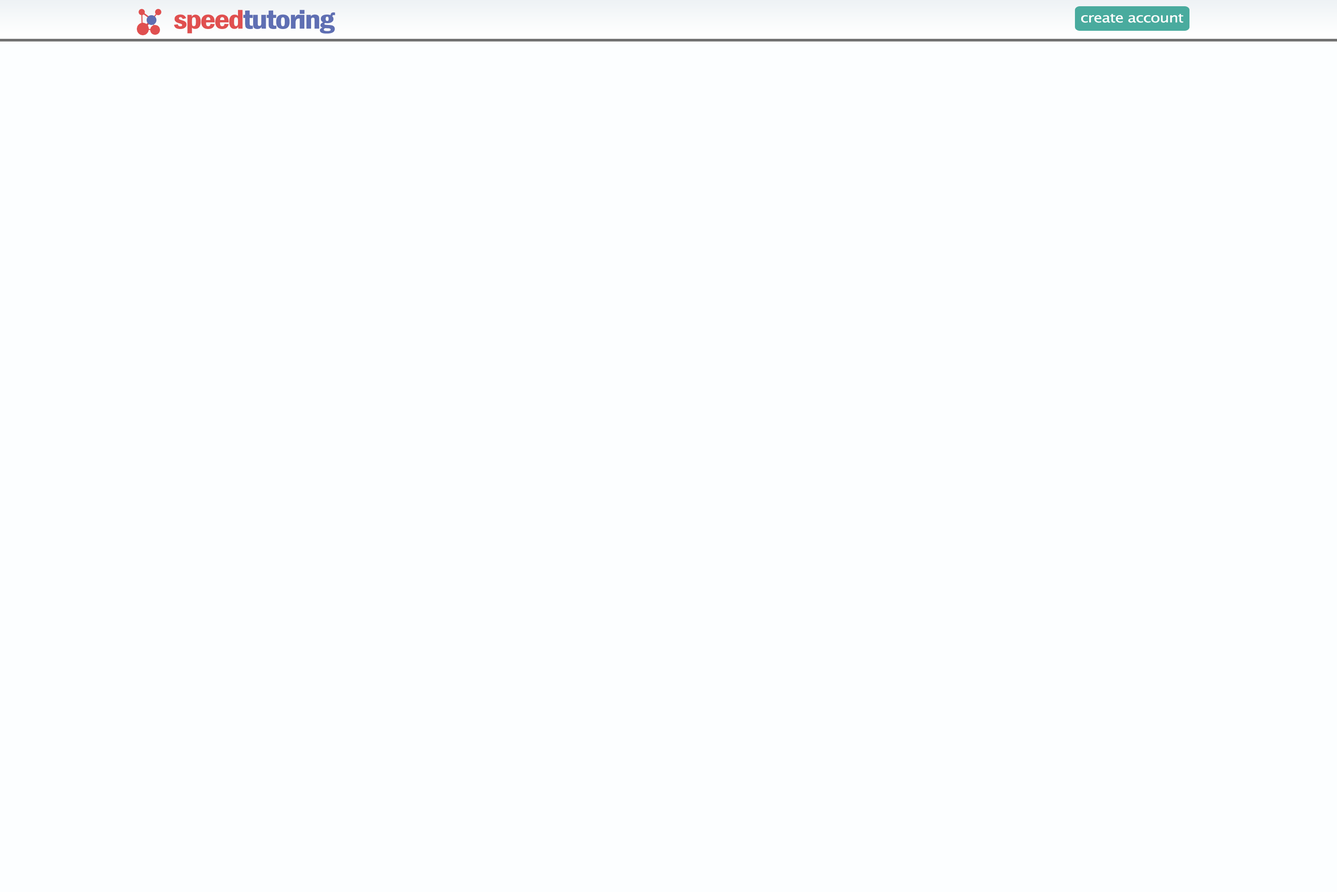
<style>
.page{position:relative;width:1337px;height:892px;background:#fcfeff}
.page>*{position:absolute;margin:0}
.t1{font:27.9px "FranklinGothic-DemiCond";letter-spacing:-0.04em;color:#5f6fb3;scale:1.19 1}
.t2{font:27.9px "FranklinGothic-DemiCond";letter-spacing:-0.04em;color:#e05050;scale:1.19 1}
.t3{font:13.1px "LucidaSansUnicode";letter-spacing:-0.04em;color:#ffffff;scale:1.2 1}
</style>
<div class="page">
<p class="t1" style="left:174px;top:10px;width:161px;height:24px"><span class="t2">speed</span>tutoring</p>
<p class="t3" style="left:1082px;top:14px;width:102px;height:9px">create account</p>
</div>
